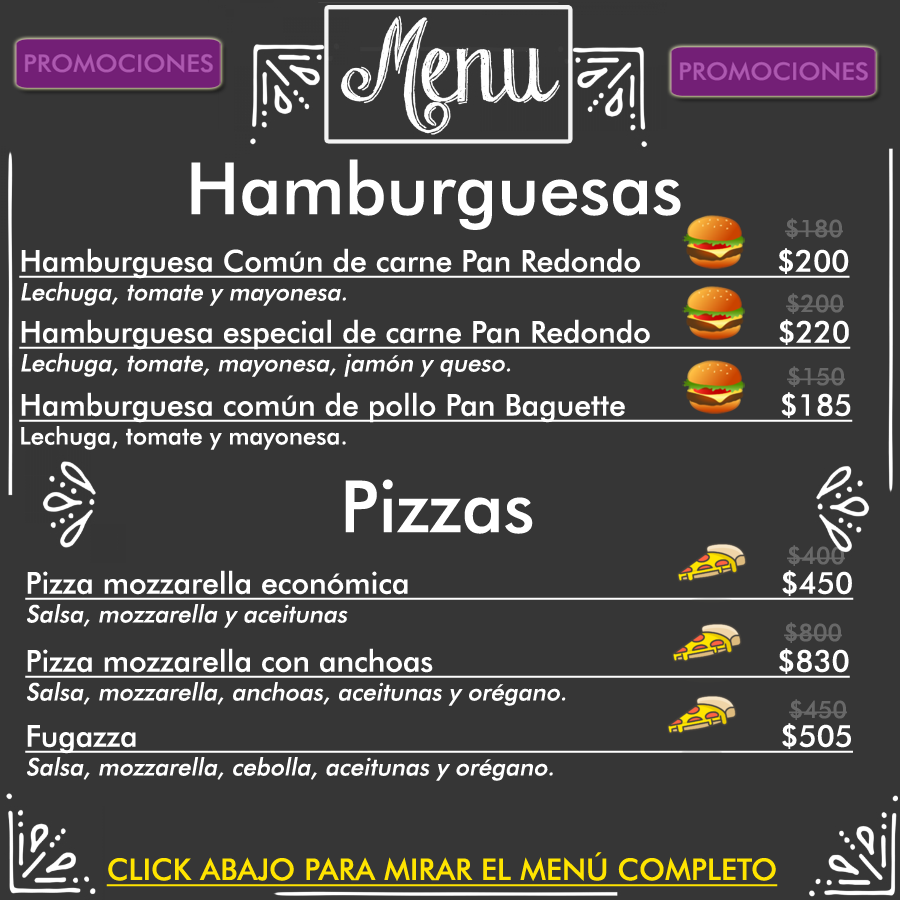
<style>
.page{position:relative;width:900px;height:900px;background:#363636}
.page>*{position:absolute;margin:0}
.t1{font:72px "FuturaBT-Medium";color:#ffffff}
.t2{font:24px "FuturaBT-Medium";color:#686868}
.t3{font:30px "FuturaBT-Medium";color:#ffffff;text-decoration:underline}
.t4{font:24px "FuturaBT-Medium";color:#ffffff;font-style:italic}
.t5{font:24px "FuturaBT-Medium";color:#ffffff}
.t6{font:30px "FuturaBT-Medium";color:#ffe400;text-transform:uppercase;text-decoration:underline}
</style>
<div class="page">
<p class="t1" style="left:191px;top:159px;width:490px;height:71px">Hamburguesas</p>
<p class="t2" style="left:785px;top:218px;width:58px;height:21px">$180</p>
<p class="t3" style="left:19px;top:248px;width:831px;height:58px">Hamburguesa Común de carne Pan Redondo               $200<br><span class="t4">Lechuga, tomate y mayonesa.</span></p>
<p class="t2" style="left:786px;top:293px;width:58px;height:21px">$200</p>
<p class="t3" style="left:19px;top:319px;width:832px;height:58px">Hamburguesa especial de carne Pan Redondo              $220<br><span class="t4">Lechuga, tomate, mayonesa, jamón y queso.</span></p>
<p class="t2" style="left:787px;top:366px;width:58px;height:21px">$150</p>
<p class="t3" style="left:19px;top:392px;width:834px;height:58px">Hamburguesa común de pollo Pan Baguette                 $185<br><span class="t5">Lechuga, tomate y mayonesa.</span></p>
<p class="t1" style="left:345px;top:479px;width:188px;height:55px">Pizzas</p>
<p class="t2" style="left:787px;top:545px;width:58px;height:21px">$400</p>
<p class="t3" style="left:25px;top:570px;width:829px;height:58px">Pizza mozzarella económica                                         $450<br><span class="t4">Salsa, mozzarella y aceitunas</span></p>
<p class="t2" style="left:784px;top:622px;width:58px;height:21px">$800</p>
<p class="t3" style="left:25px;top:648px;width:825px;height:58px">Pizza mozzarella con anchoas                                      $830<br><span class="t4">Salsa, mozzarella, anchoas, aceitunas y orégano.</span></p>
<p class="t2" style="left:789px;top:699px;width:58px;height:21px">$450</p>
<p class="t3" style="left:25px;top:723px;width:828px;height:58px">Fugazza                                                                       $505<br><span class="t4">Salsa, mozzarella, cebolla, aceitunas y orégano.</span></p>
<p class="t6" style="left:106px;top:852px;width:672px;height:35px">click abajo para mirar el menú completo</p>
</div>
